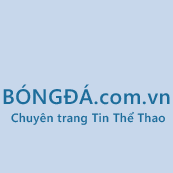
<style>
.page{position:relative;width:173px;height:173px;background:#c7d7eb}
.page>*{position:absolute;margin:0}
.t1{font:21px "SegoeWP-Semibold";letter-spacing:0.025em;color:#1d6d9b}
.t2{font:12px "SegoeWP-Semibold";letter-spacing:0.025em;color:#1d6d9b}
</style>
<div class="page">
<p class="t1" style="left:3px;top:84px;width:167px;height:21px">BÓNGĐÁ.com.vn</p>
<p class="t2" style="left:11px;top:111px;width:154px;height:14px">Chuyên trang Tin Thể Thao</p>
</div>
